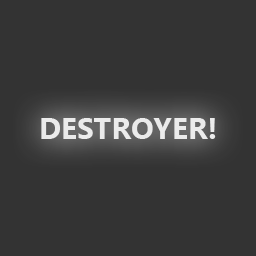
<style>
.page{position:relative;width:256px;height:256px;background:#333333}
.page>*{position:absolute;margin:0}
.t1{font:30px "MicrosoftTaiLe-Bold";color:#ebebeb}
</style>
<div class="page">
<p class="t1" style="left:41px;top:118px;width:175px;height:21px">DESTROYER!</p>
</div>
